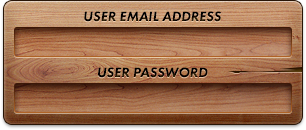
<style>
.page{position:relative;width:306px;height:130px}
.page>*{position:absolute;margin:0}
.t1{font:14px "FuturaPT-HeavyObl";color:#000000;text-transform:uppercase}
</style>
<div class="page">
<p class="t1" style="left:84px;top:11px;width:137px;height:11px">User Email Address</p>
<p class="t1" style="left:98px;top:67px;width:110px;height:11px">User Password</p>
</div>
